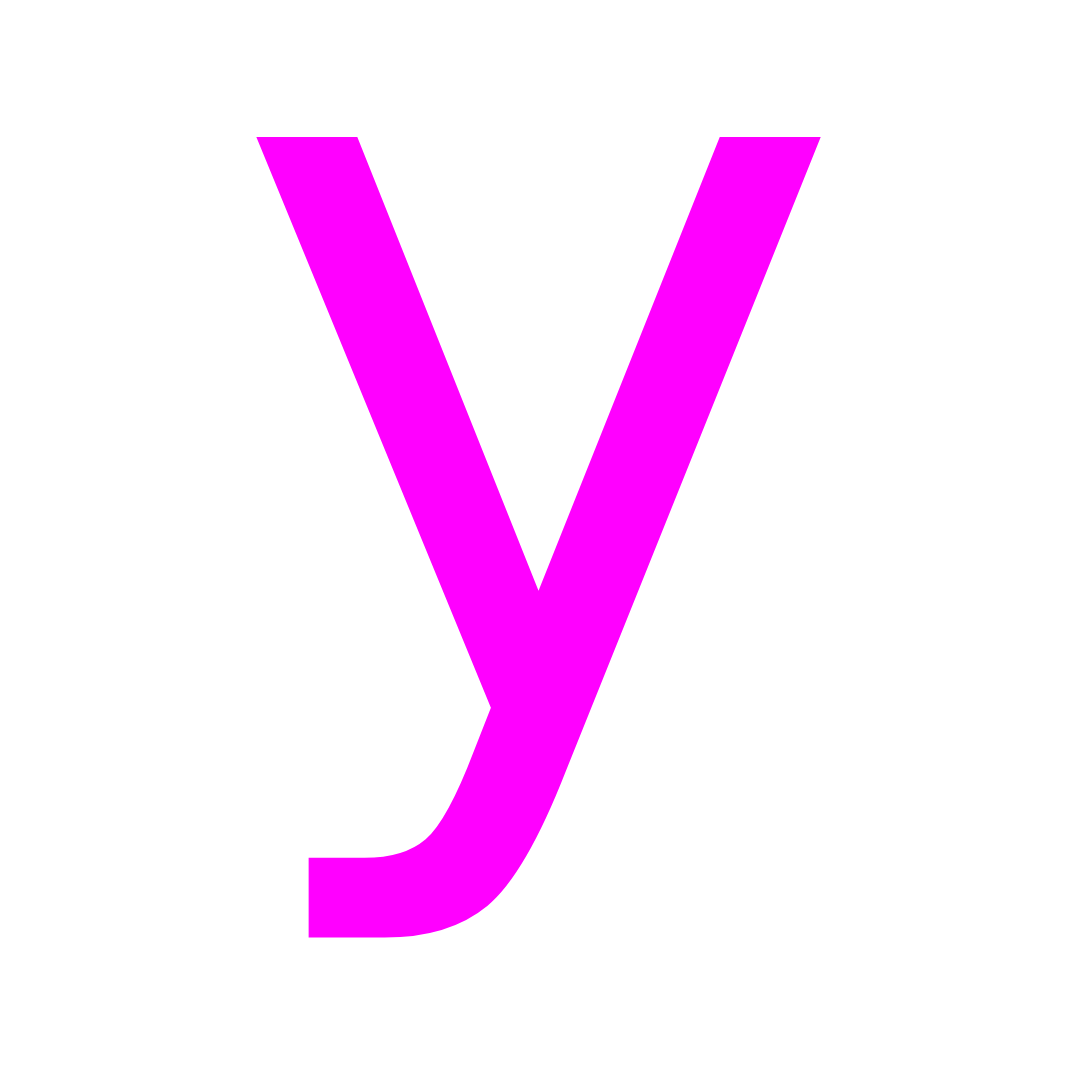
<style>
.page{position:relative;width:1080px;height:1080px;background:#ffffff}
.page>*{position:absolute;margin:0}
.t1{font:1060.4px "DejaVuSans";color:#ff00ff}
</style>
<div class="page">
<p class="t1" style="left:256px;top:137px;width:565px;height:801px">y</p>
</div>
